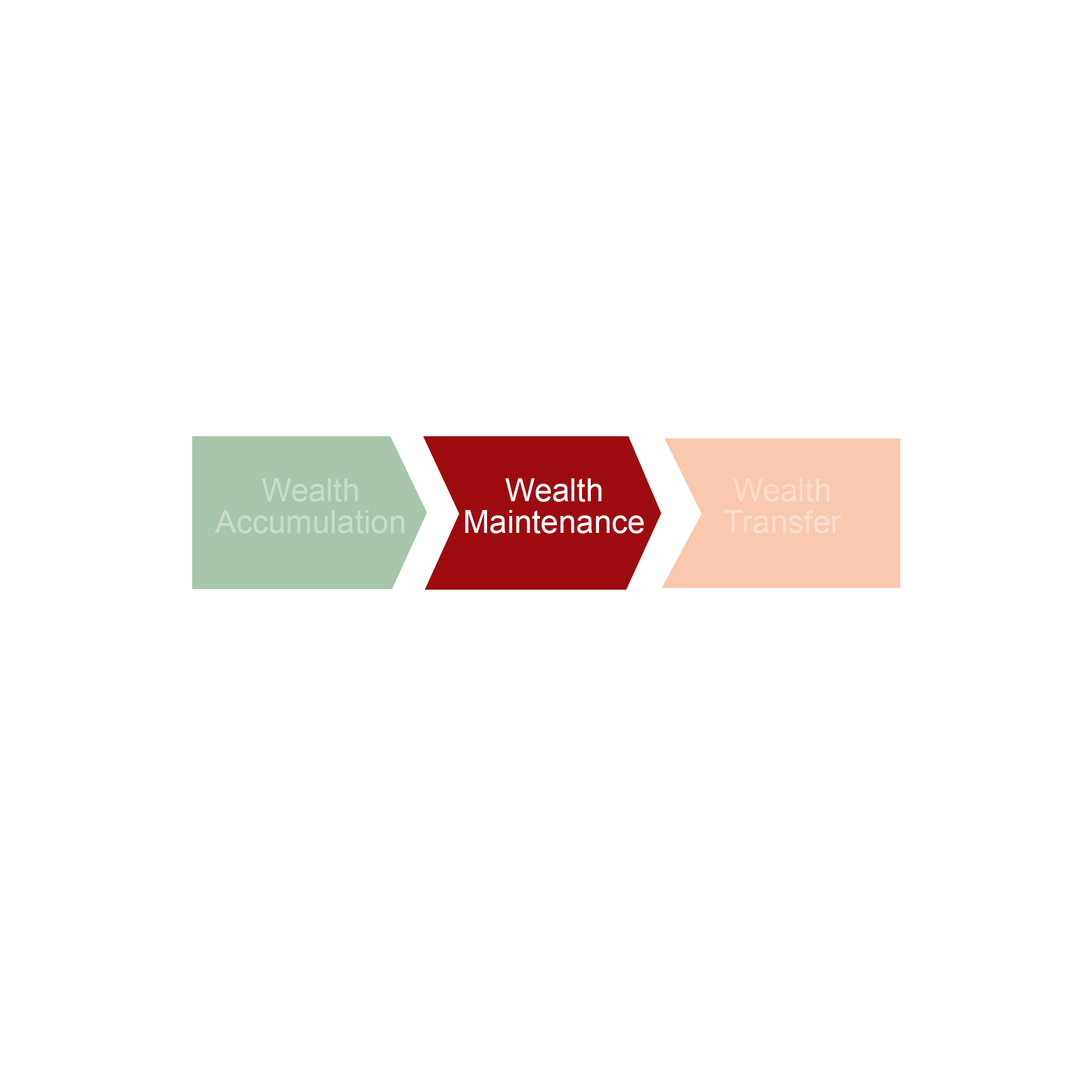
<style>
.page{position:relative;width:1092px;height:1092px;background:#ffffff}
.page>*{position:absolute;margin:0}
.t1{font:31.8px/22.7px "ArialMT";color:#c9dccc}
.t2{font:31.8px/22.7px "ArialMT";color:#ffffff}
.t3{font:31.8px/22.7px "ArialMT";color:#fcdcce}
</style>
<div class="page">
<p class="t1" style="left:215px;top:478px;width:190px;height:55px;text-align:center">Wealth<br>Accumulation</p>
<p class="t2" style="left:465px;top:478px;width:179px;height:55px;text-align:center">Wealth<br>Maintenance</p>
<p class="t3" style="left:724px;top:478px;width:117px;height:55px;text-align:center">Wealth<br>Transfer</p>
</div>
